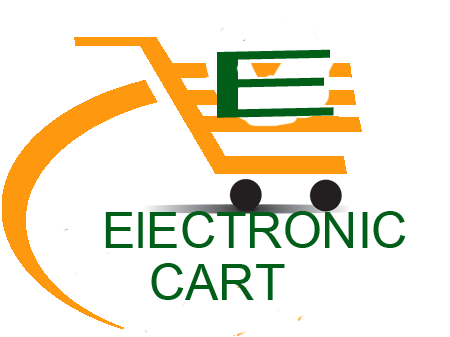
<style>
.page{position:relative;width:450px;height:337px;background:#ffffff}
.page>*{position:absolute;margin:0}
.t1{font:50px "ArialUnicodeMS";color:#005e18}
</style>
<div class="page">
<p class="t1" style="left:105px;top:211px;width:301px;height:37px">ElECTRONIC</p>
<p class="t1" style="left:151px;top:263px;width:134px;height:37px">CART</p>
</div>
